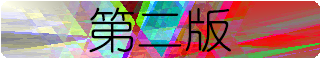
<style>
.page{position:relative;width:320px;height:60px}
.page>*{position:absolute;margin:0}
.t1{font:48px "YouYuan";color:#000000}
</style>
<div class="page">
<p class="t1" style="left:89px;top:7px;width:142px;height:46px">第二版</p>
</div>
